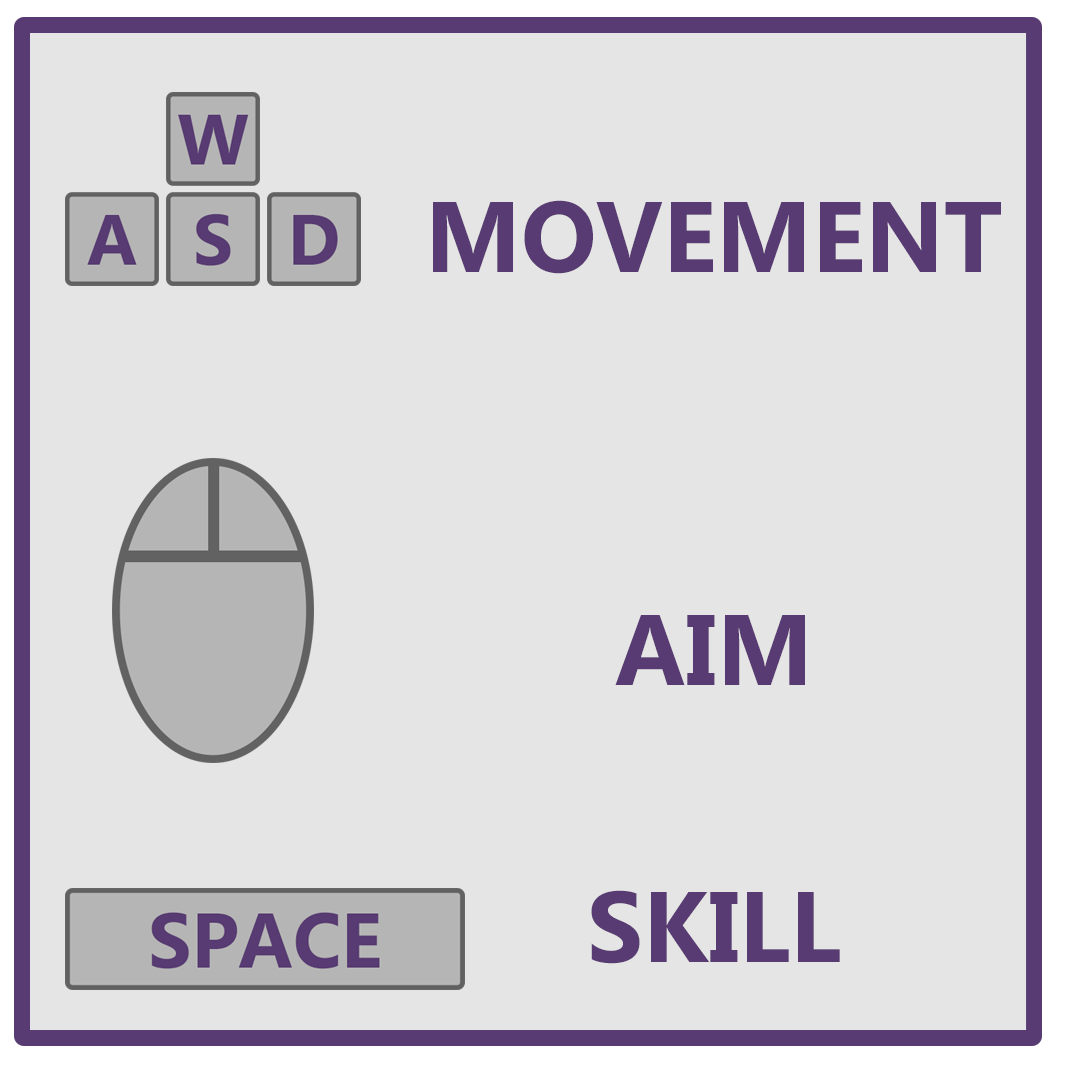
<style>
.page{position:relative;width:1080px;height:1080px;background:#e5e5e5}
.page>*{position:absolute;margin:0}
.t1{font:100px "MyanmarText-Bold";color:#583b72}
</style>
<div class="page">
<p class="t1" style="left:433px;top:200px;width:568px;height:74px">MOVEMENT</p>
<p class="t1" style="left:615px;top:615px;width:190px;height:70px">AIM</p>
<p class="t1" style="left:591px;top:890px;width:249px;height:74px">SKILL</p>
</div>
